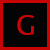
<style>
.page{position:relative;width:50px;height:50px;background:#040404}
.page>*{position:absolute;margin:0}
.t1{font:27.6px "LucidaGrande";color:#c70505}
</style>
<div class="page">
<p class="t1" style="left:17px;top:15px;width:17px;height:20px">G</p>
</div>
